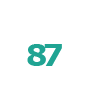
<style>
.page{position:relative;width:90px;height:90px;background:#ffffff}
.page>*{position:absolute;margin:0}
.t1{font:30px "Verdana-Bold";letter-spacing:-0.15em;color:#20a493}
</style>
<div class="page">
<p class="t1" style="left:27px;top:44px;width:35px;height:22px">87</p>
</div>
